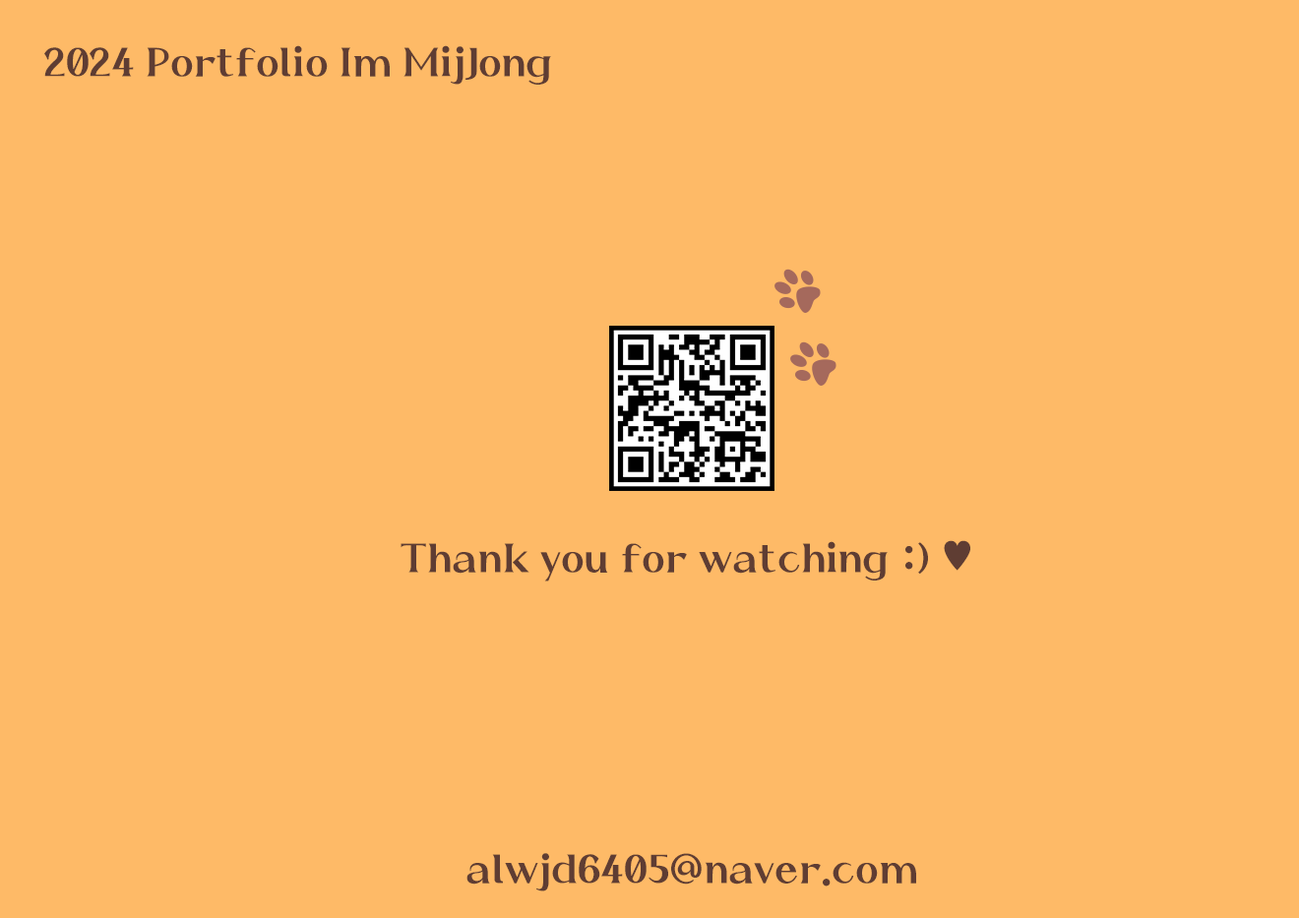
<style>
.page{position:relative;width:1299px;height:918px;background:#feba67}
.page>*{position:absolute;margin:0}
.t1{font:39.4px "HSBombaram21";color:#5f3d33}
.t2{font:39.4px "Gulim";color:#5f3d33}
</style>
<div class="page">
<p class="t1" style="left:44px;top:45px;width:507px;height:40px">2024 Portfolio Im MijJong</p>
<p class="t1" style="left:400px;top:540px;width:570px;height:42px">Thank you for watching :) <span class="t2">♥</span></p>
<p class="t1" style="left:466px;top:853px;width:450px;height:38px">alwjd6405@naver.com</p>
</div>
